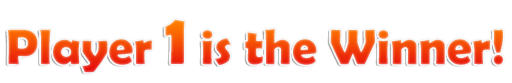
<style>
.page{position:relative;width:512px;height:83px;background:#ffffff}
.page>*{position:absolute;margin:0}
.t1{font:50px "BerlinSansFBDemi-Bold"}
.t2{font:72px "BerlinSansFBDemi-Bold"}
</style>
<div class="page">
<p class="t1" style="left:8px;top:19px;width:495px;height:54px">Player <span class="t2">1</span> is the Winner!</p>
</div>
